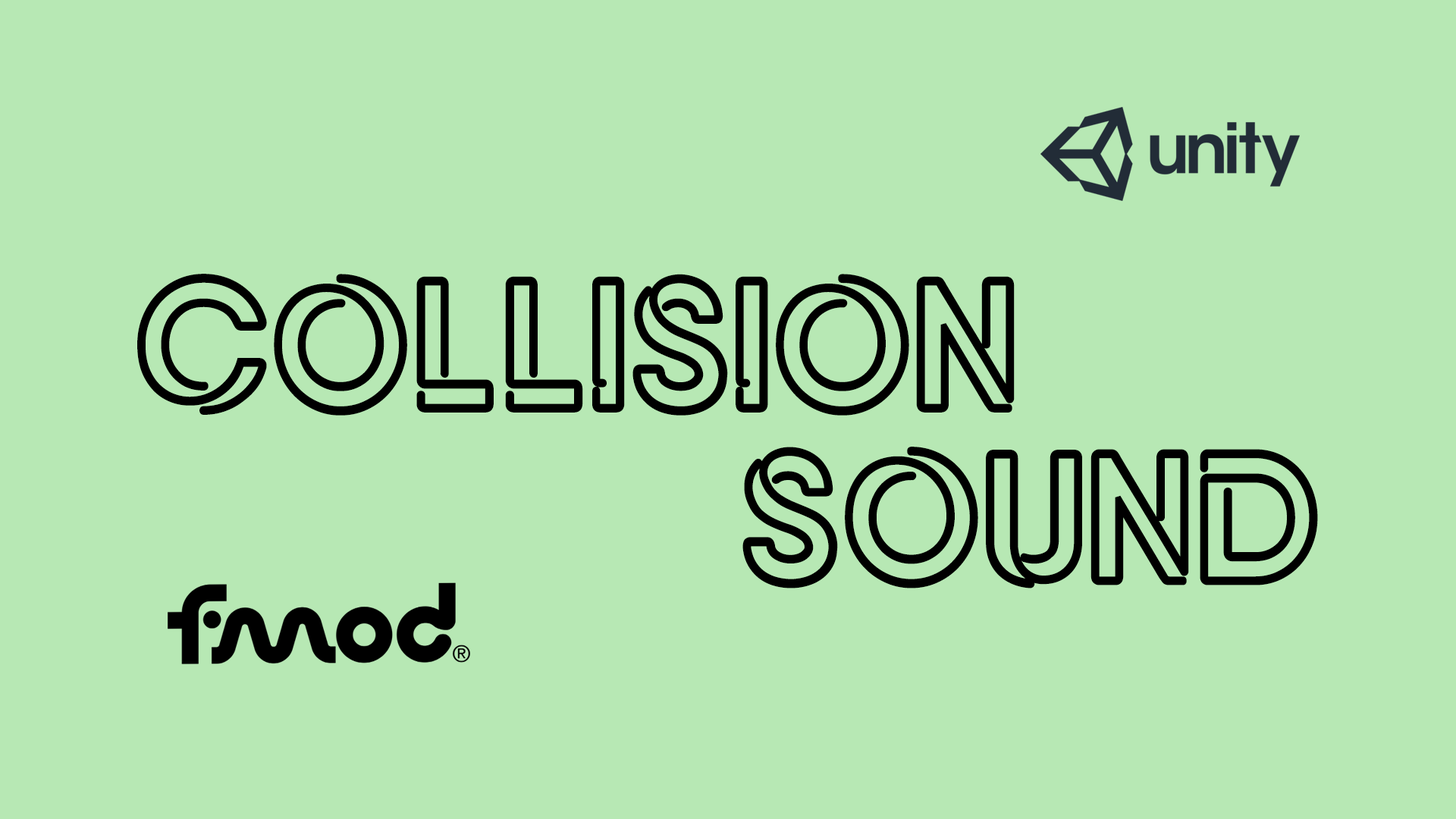
<style>
.page{position:relative;width:1456px;height:819px;background:#b7e8b4}
.page>*{position:absolute;margin:0}
.t1{font:213px/172.7px "NEON";color:#000000;font-weight:bold;scale:0.95 1}
</style>
<div class="page">
<p class="t1" style="left:137px;top:274px;width:1181px;height:314px;text-align:center">Collision<br>         sound</p>
</div>
